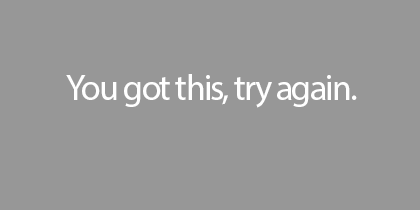
<style>
.page{position:relative;width:420px;height:210px;background:#979797}
.page>*{position:absolute;margin:0}
.t1{font:36px "MyriadPro-Regular";letter-spacing:-0.05em;color:#ffffff}
</style>
<div class="page">
<p class="t1" style="left:66px;top:74px;width:291px;height:34px">You got this, try again.</p>
</div>
